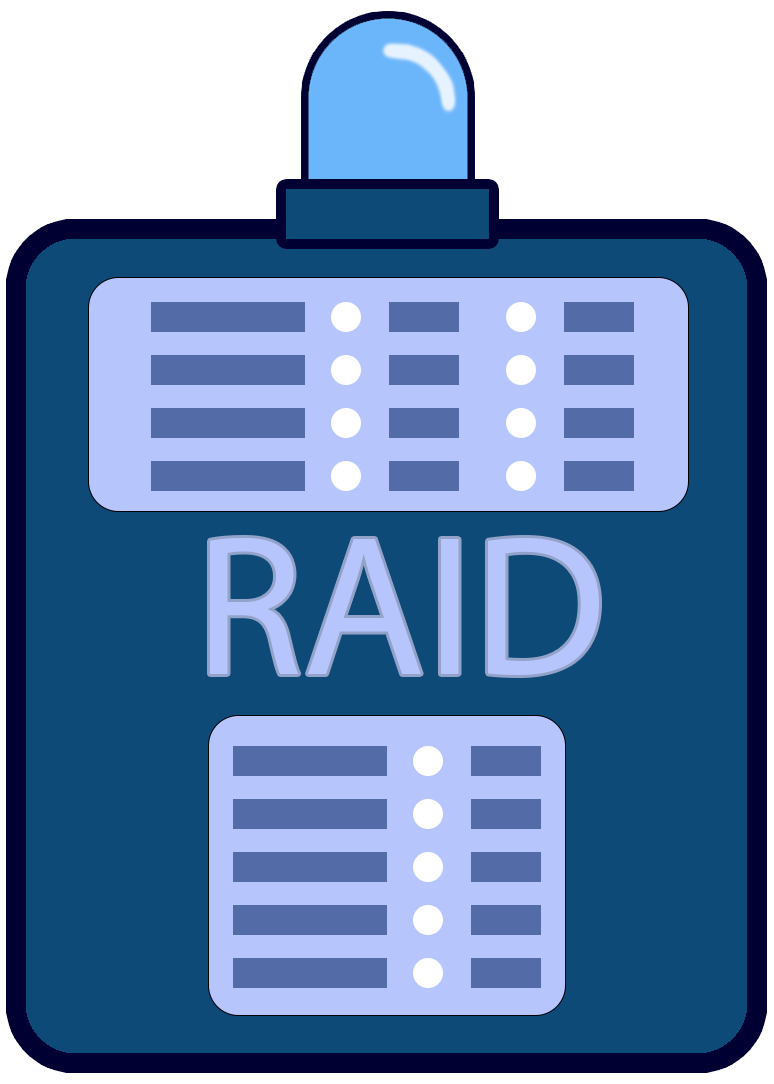
<style>
.page{position:relative;width:774px;height:1084px;background:#0e4a77}
.page>*{position:absolute;margin:0}
.t1{font:200px "MyriadPro-Regular";color:#b7c5fd}
</style>
<div class="page">
<p class="t1" style="left:210px;top:537px;width:389px;height:138px">RAID</p>
</div>
